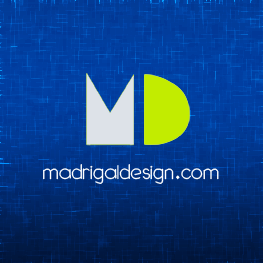
<style>
.page{position:relative;width:263px;height:263px}
.page>*{position:absolute;margin:0}
.t1{font:25.9px "ModenoLX";color:#ffffff}
</style>
<div class="page">
<p class="t1" style="left:43px;top:164px;width:176px;height:20px">madrigaldesign.com</p>
</div>
